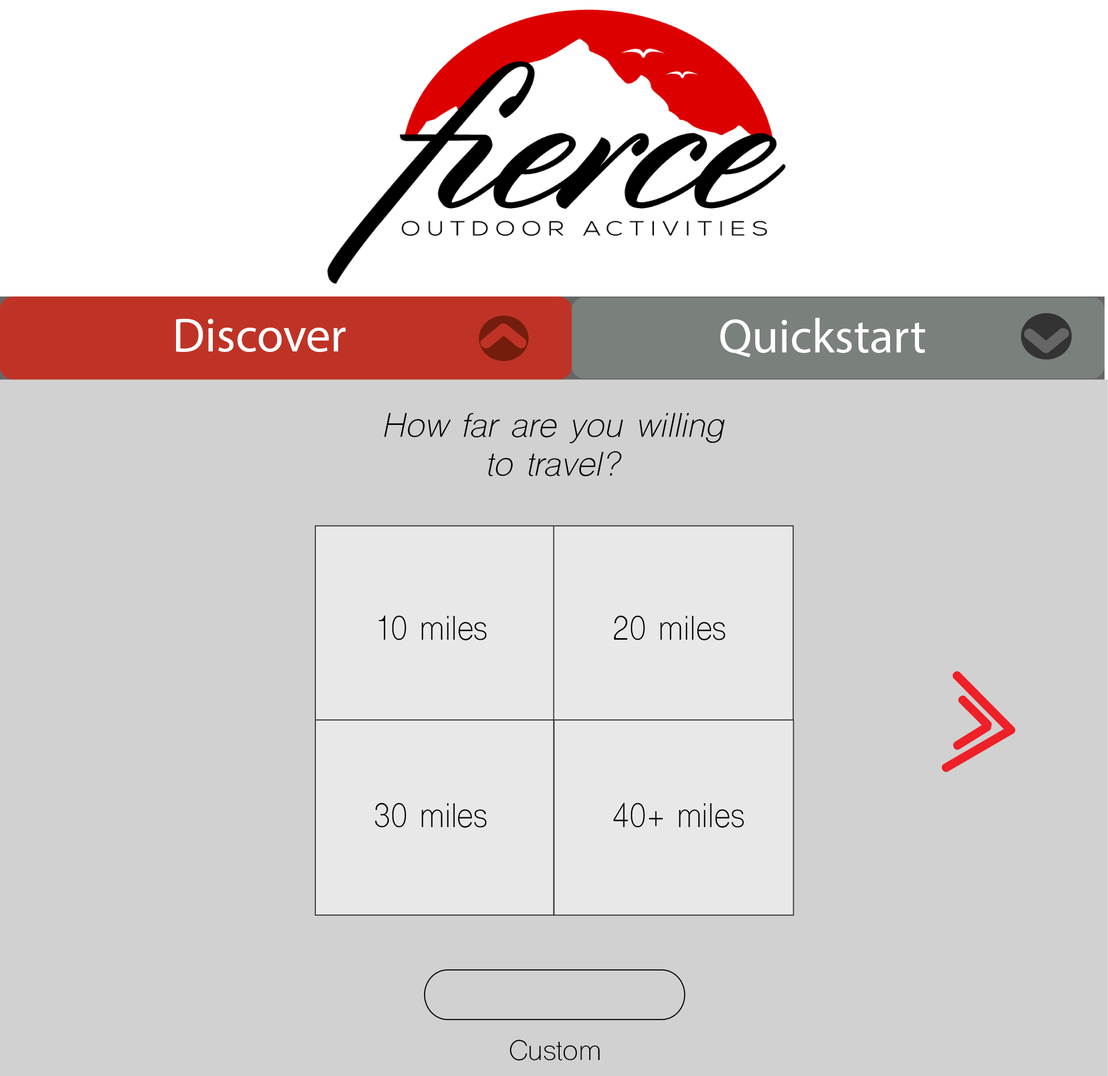
<style>
.page{position:relative;width:1108px;height:1076px;background:#d1d1d1}
.page>*{position:absolute;margin:0}
.t1{font:48.5px "MyriadPro-Regular";color:#ffffff}
.t2{font:32.4px "ShreeDev0714-Italic";color:#000000}
.t3{font:32.4px "ShreeDev0714";color:#000000;scale:0.91 1}
.t4{font:26.7px "ShreeDev0714";color:#000000}
</style>
<div class="page">
<p class="t1" style="left:720px;top:318px;width:205px;height:40px">Quickstart</p>
<p class="t1" style="left:176px;top:319px;width:170px;height:33px">Discover</p>
<p class="t2" style="left:384px;top:413px;width:341px;height:64px;text-align:center">How far are you willing <br>to travel?</p>
<p class="t3" style="left:378px;top:616px;width:109px;height:25px">10 miles</p>
<p class="t3" style="left:614px;top:616px;width:111px;height:25px">20 miles</p>
<p class="t3" style="left:375px;top:803px;width:112px;height:25px">30 miles</p>
<p class="t3" style="left:613px;top:803px;width:131px;height:25px">40+ miles</p>
<p class="t4" style="left:510px;top:1040px;width:90px;height:21px">Custom</p>
</div>
